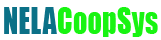
<style>
.page{position:relative;width:161px;height:40px;background:#ffffff}
.page>*{position:absolute;margin:0}
.t1{font:34.3px "Impact";letter-spacing:0.02em;color:#18f412;scale:0.81 1}
.t2{font:34.3px "Impact";letter-spacing:0.02em;color:#0b7187;scale:0.81 1}
</style>
<div class="page">
<p class="t1" style="left:4px;top:7px;width:154px;height:30px"><span class="t2">NELA</span>CoopSys</p>
</div>
